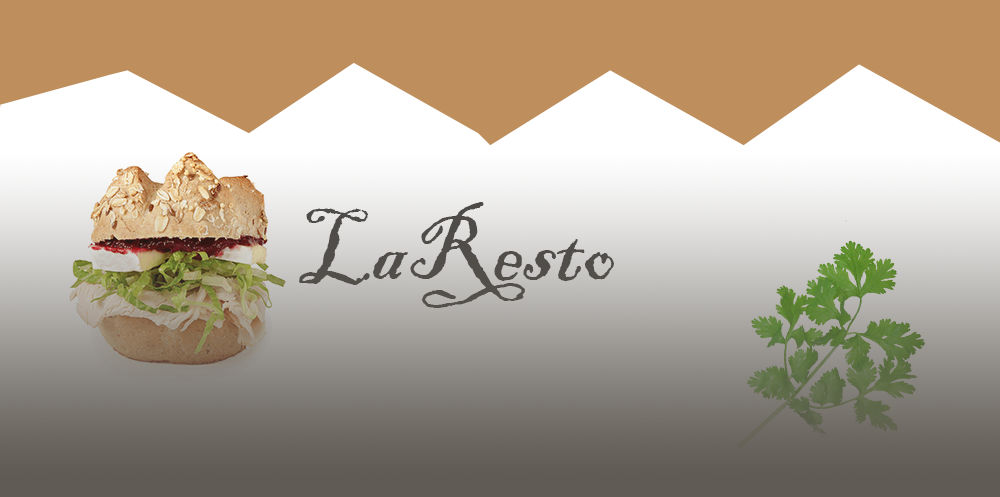
<style>
.page{position:relative;width:1000px;height:497px;background:#be8f5d}
.page>*{position:absolute;margin:0}
.t1{font:100px "BlackadderITC-Regular";color:#4a4846}
</style>
<div class="page">
<p class="t1" style="left:299px;top:202px;width:315px;height:106px">LaResto</p>
</div>
